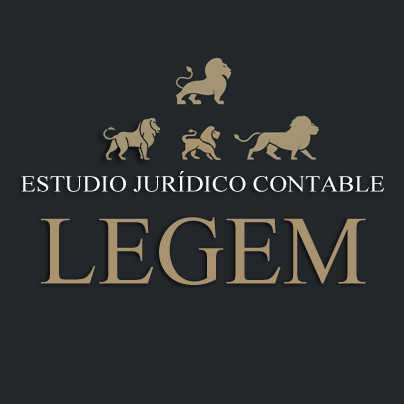
<style>
.page{position:relative;width:404px;height:404px;background:#22272c}
.page>*{position:absolute;margin:0}
.t1{font:23px "TimesNewRomanPSMT";color:#ffffff;scale:1.08 1}
.t2{font:98px "TimesNewRomanPSMT";color:#a9936d}
</style>
<div class="page">
<p class="t1" style="left:21px;top:171px;width:364px;height:21px">ESTUDIO JURÍDICO CONTABLE</p>
<p class="t2" style="left:41px;top:217px;width:325px;height:68px">LEGEM</p>
</div>
